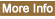
<style>
.page{position:relative;width:55px;height:19px;background:#946e38}
.page>*{position:absolute;margin:0}
.t1{font:11.8px "ArialMT";color:#ffffff;font-weight:bold;scale:0.96 1}
</style>
<div class="page">
<p class="t1" style="left:2px;top:3px;width:51px;height:10px">More Info</p>
</div>
